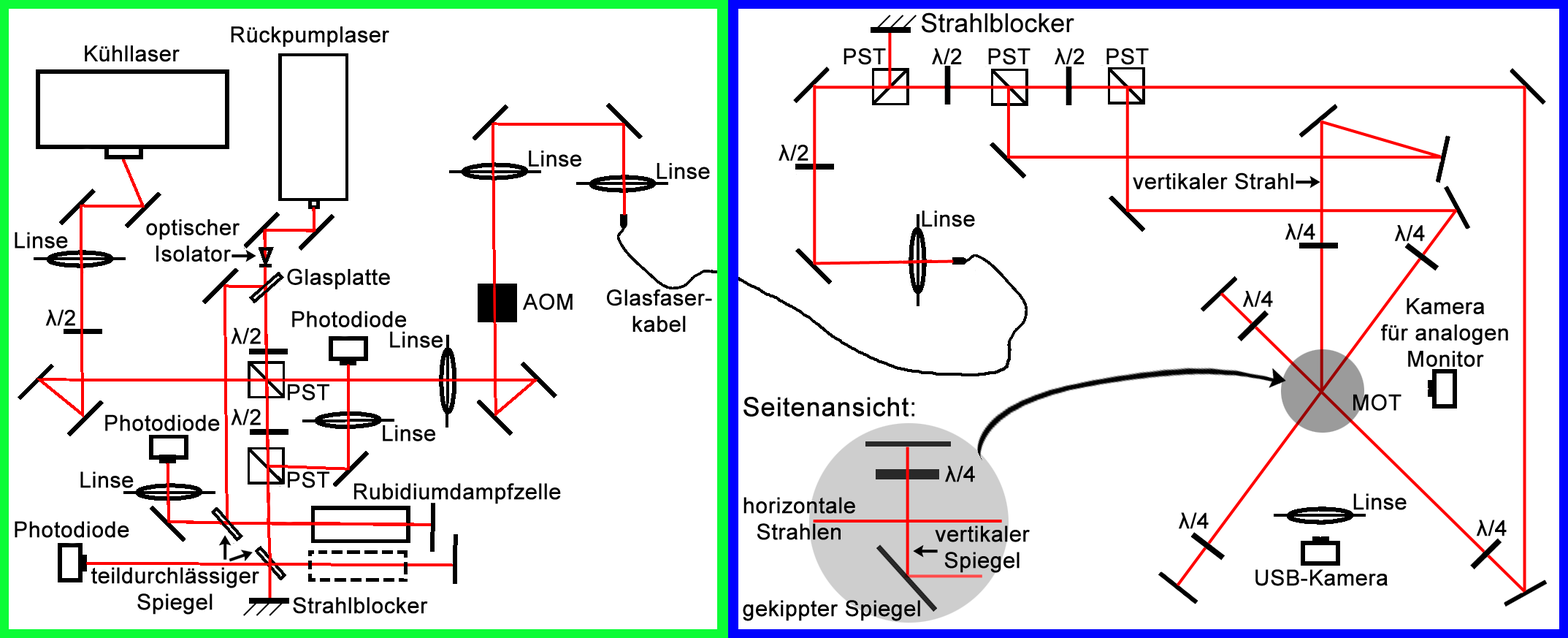
<style>
.page{position:relative;width:1568px;height:638px;background:#ffffff}
.page>*{position:absolute;margin:0}
.t1{font:26.3px "ArialMT";color:#000000}
.t2{font:21.9px "ArialMT";color:#000000;font-weight:bold}
.t3{font:26.3px "ArialMT";color:#000000;font-weight:bold}
</style>
<div class="page">
<p class="t1" style="left:922px;top:12px;width:152px;height:21px">Strahlblocker</p>
<p class="t2" style="left:231px;top:26px;width:158px;height:21px">Rückpumplaser</p>
<p class="t2" style="left:85px;top:45px;width:95px;height:17px">Kühllaser</p>
<p class="t2" style="left:844px;top:48px;width:42px;height:17px">PST</p>
<p class="t2" style="left:932px;top:48px;width:30px;height:16px">λ/2</p>
<p class="t2" style="left:988px;top:48px;width:42px;height:17px">PST</p>
<p class="t2" style="left:1055px;top:48px;width:30px;height:16px">λ/2</p>
<p class="t2" style="left:1106px;top:48px;width:43px;height:17px">PST</p>
<p class="t2" style="left:779px;top:145px;width:29px;height:16px">λ/2</p>
<p class="t2" style="left:529px;top:150px;width:52px;height:17px">Linse</p>
<p class="t2" style="left:657px;top:163px;width:53px;height:16px">Linse</p>
<p class="t2" style="left:1133px;top:172px;width:160px;height:17px">vertikaler Strahl</p>
<p class="t2" style="left:146px;top:219px;width:94px;height:42px;text-align:center">optischer<br>Isolator</p>
<p class="t2" style="left:922px;top:210px;width:53px;height:17px">Linse</p>
<p class="t2" style="left:15px;top:232px;width:53px;height:16px">Linse</p>
<p class="t2" style="left:1285px;top:223px;width:30px;height:17px">λ/4</p>
<p class="t2" style="left:1395px;top:225px;width:30px;height:16px">λ/4</p>
<p class="t2" style="left:287px;top:268px;width:103px;height:21px">Glasplatte</p>
<p class="t2" style="left:523px;top:293px;width:50px;height:17px">AOM</p>
<p class="t2" style="left:607px;top:289px;width:105px;height:43px;text-align:center">Glasfaser-<br>kabel</p>
<p class="t2" style="left:1243px;top:291px;width:30px;height:16px">λ/4</p>
<p class="t2" style="left:1381px;top:298px;width:127px;height:69px;text-align:center">Kamera<br>für analogen<br>Monitor</p>
<p class="t2" style="left:45px;top:309px;width:30px;height:17px">λ/2</p>
<p class="t2" style="left:292px;top:310px;width:114px;height:17px">Photodiode</p>
<p class="t2" style="left:231px;top:327px;width:30px;height:17px">λ/2</p>
<p class="t2" style="left:390px;top:331px;width:53px;height:17px">Linse</p>
<p class="t2" style="left:288px;top:383px;width:41px;height:17px">PST</p>
<p class="t3" style="left:743px;top:397px;width:171px;height:19px">Seitenansicht:</p>
<p class="t2" style="left:1353px;top:394px;width:48px;height:16px">MOT</p>
<p class="t2" style="left:231px;top:408px;width:30px;height:17px">λ/2</p>
<p class="t2" style="left:105px;top:414px;width:115px;height:17px">Photodiode</p>
<p class="t2" style="left:383px;top:424px;width:52px;height:17px">Linse</p>
<p class="t2" style="left:80px;top:471px;width:54px;height:17px">Linse</p>
<p class="t2" style="left:288px;top:471px;width:41px;height:17px">PST</p>
<p class="t2" style="left:945px;top:465px;width:30px;height:17px">λ/4</p>
<p class="t2" style="left:354px;top:483px;width:207px;height:21px">Rubidiumdampfzelle</p>
<p class="t2" style="left:743px;top:497px;width:112px;height:43px;text-align:center">horizontale<br>Strahlen</p>
<p class="t2" style="left:1353px;top:493px;width:54px;height:17px">Linse</p>
<p class="t2" style="left:15px;top:521px;width:114px;height:17px">Photodiode</p>
<p class="t2" style="left:1179px;top:512px;width:30px;height:17px">λ/4</p>
<p class="t2" style="left:1476px;top:519px;width:31px;height:17px">λ/4</p>
<p class="t2" style="left:935px;top:525px;width:95px;height:48px;text-align:center">vertikaler<br>Spiegel</p>
<p class="t2" style="left:91px;top:567px;width:168px;height:47px;text-align:center">teildurchlässiger<br>Spiegel</p>
<p class="t2" style="left:1255px;top:569px;width:133px;height:17px">USB-Kamera</p>
<p class="t2" style="left:293px;top:597px;width:135px;height:16px">Strahlblocker</p>
<p class="t2" style="left:743px;top:600px;width:177px;height:21px">gekippter Spiegel</p>
</div>
